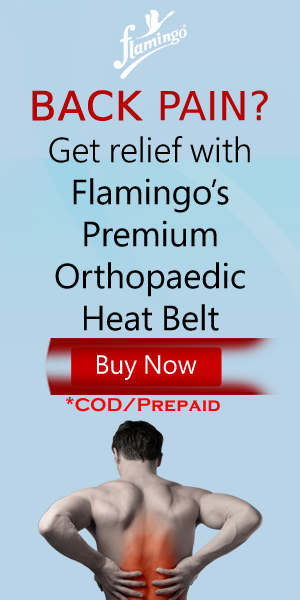
<style>
.page{position:relative;width:300px;height:600px;background:#bad4e7}
.page>*{position:absolute;margin:0}
.t1{font:40px "RupeeForadian";letter-spacing:0.005em;color:#b90000;text-transform:uppercase}
.t2{font:40px "RupeeForadian";letter-spacing:0.005em;color:#b90000;text-transform:uppercase;font-weight:bold}
.t3{font:35px "SegoePro";color:#000000}
.t4{font:35px "SegoePro-SemiLight";color:#000000}
.t5{font:26.3px "SegoePro";color:#ffffff}
.t6{font:18.9px "CopperplateGothic-Bold";letter-spacing:0.005em;color:#ff0000}
</style>
<div class="page">
<p class="t1" style="left:32px;top:90px;width:236px;height:31px"><span class="t2">Back </span>pain?</p>
<p class="t3" style="left:49px;top:136px;width:201px;height:195px;text-align:center"><span class="t4">Get relief with<br></span>Flamingo’s<br>Premium Orthopaedic <br>Heat Belt</p>
<p class="t5" style="left:97px;top:355px;width:100px;height:25px">Buy Now</p>
<p class="t6" style="left:66px;top:397px;width:154px;height:15px">*COD/Prepaid</p>
</div>
